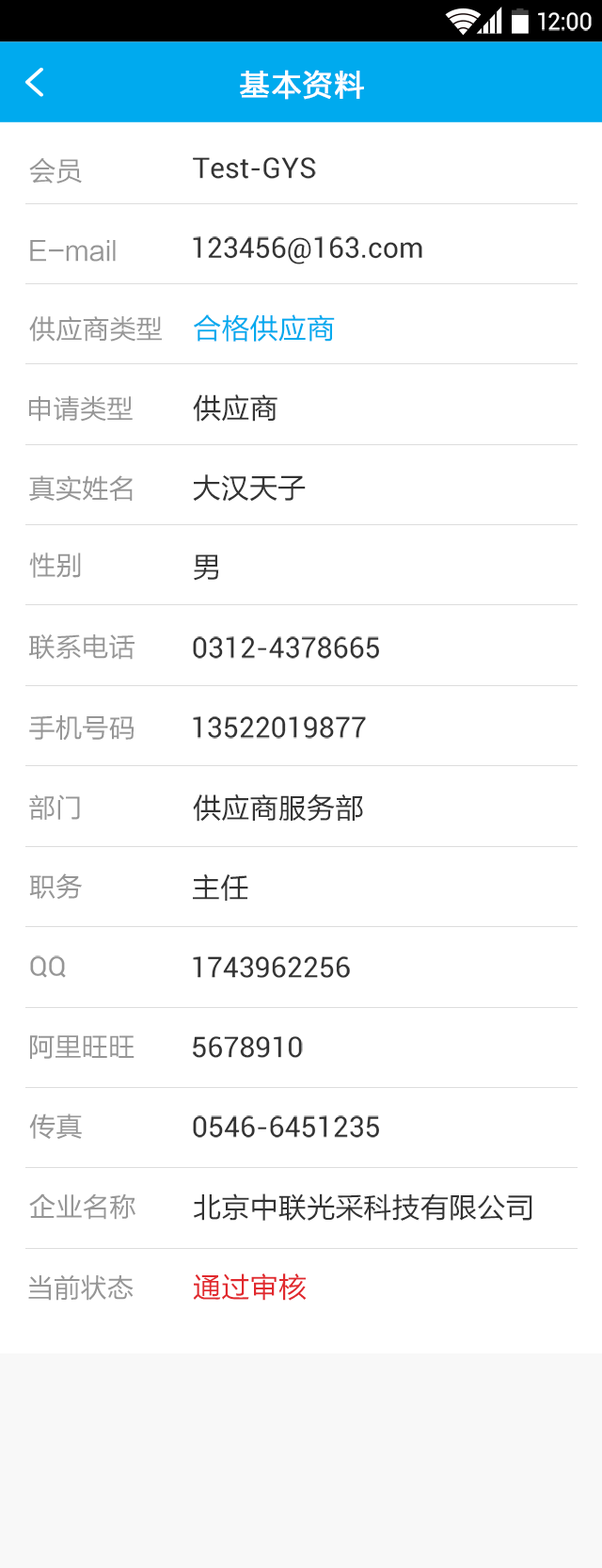
<style>
.page{position:relative;width:602px;height:1568px;background:#ffffff}
.page>*{position:absolute;margin:0}
.t1{font:23.4px "Roboto-Regular";color:#ffffff}
.t2{font:30.1px "FZLTHJW--GB1-0";letter-spacing:0.02em;color:#ffffff;font-weight:bold}
.t3{font:26.8px "FZLTHJW--GB1-0";color:#969696}
.t4{font:28.4px "Roboto-Regular";color:#333333}
.t5{font:28.4px "FZLTHJW--GB1-0";color:#00aaee}
.t6{font:28.4px "FZLTHJW--GB1-0";color:#333333}
.t7{font:26.8px "Roboto-Regular";color:#969696}
.t8{font:28.4px "FZLTHJW--GB1-0";color:#e1292e}
</style>
<div class="page">
<p class="t1" style="left:538px;top:12px;width:54px;height:19px">12:00</p>
<p class="t2" style="left:240px;top:70px;width:124px;height:30px">基本资料</p>
<p class="t3" style="left:29px;top:158px;width:53px;height:26px">会员</p>
<p class="t4" style="left:193px;top:157px;width:123px;height:22px">Test-GYS</p>
<p class="t3" style="left:30px;top:240px;width:86px;height:22px">E-mail</p>
<p class="t4" style="left:193px;top:236px;width:230px;height:28px">123456@163.com</p>
<p class="t3" style="left:29px;top:316px;width:133px;height:26px">供应商类型</p>
<p class="t5" style="left:194px;top:314px;width:141px;height:28px">合格供应商</p>
<p class="t3" style="left:29px;top:395px;width:104px;height:27px">申请类型</p>
<p class="t6" style="left:193px;top:394px;width:85px;height:28px">供应商</p>
<p class="t3" style="left:29px;top:475px;width:104px;height:26px">真实姓名</p>
<p class="t6" style="left:193px;top:474px;width:113px;height:28px">大汉天子</p>
<p class="t3" style="left:29px;top:552px;width:52px;height:26px">性别</p>
<p class="t6" style="left:194px;top:554px;width:25px;height:27px">男</p>
<p class="t3" style="left:29px;top:634px;width:106px;height:26px">联系电话</p>
<p class="t4" style="left:193px;top:636px;width:186px;height:23px">0312-4378665</p>
<p class="t3" style="left:29px;top:715px;width:105px;height:26px">手机号码</p>
<p class="t4" style="left:193px;top:716px;width:173px;height:23px">13522019877</p>
<p class="t3" style="left:29px;top:794px;width:51px;height:26px">部门</p>
<p class="t6" style="left:193px;top:793px;width:170px;height:29px">供应商服务部</p>
<p class="t3" style="left:29px;top:873px;width:53px;height:26px">职务</p>
<p class="t6" style="left:193px;top:873px;width:55px;height:28px">主任</p>
<p class="t7" style="left:30px;top:955px;width:36px;height:23px">QQ</p>
<p class="t4" style="left:193px;top:956px;width:157px;height:22px">1743962256</p>
<p class="t3" style="left:30px;top:1035px;width:105px;height:24px">阿里旺旺</p>
<p class="t4" style="left:193px;top:1036px;width:110px;height:22px">5678910</p>
<p class="t3" style="left:29px;top:1113px;width:53px;height:26px">传真</p>
<p class="t4" style="left:193px;top:1115px;width:186px;height:23px">0546-6451235</p>
<p class="t3" style="left:29px;top:1193px;width:107px;height:27px">企业名称</p>
<p class="t6" style="left:194px;top:1193px;width:339px;height:28px">北京中联光采科技有限公司</p>
<p class="t3" style="left:28px;top:1274px;width:106px;height:27px">当前状态</p>
<p class="t8" style="left:193px;top:1273px;width:114px;height:28px">通过审核</p>
</div>
